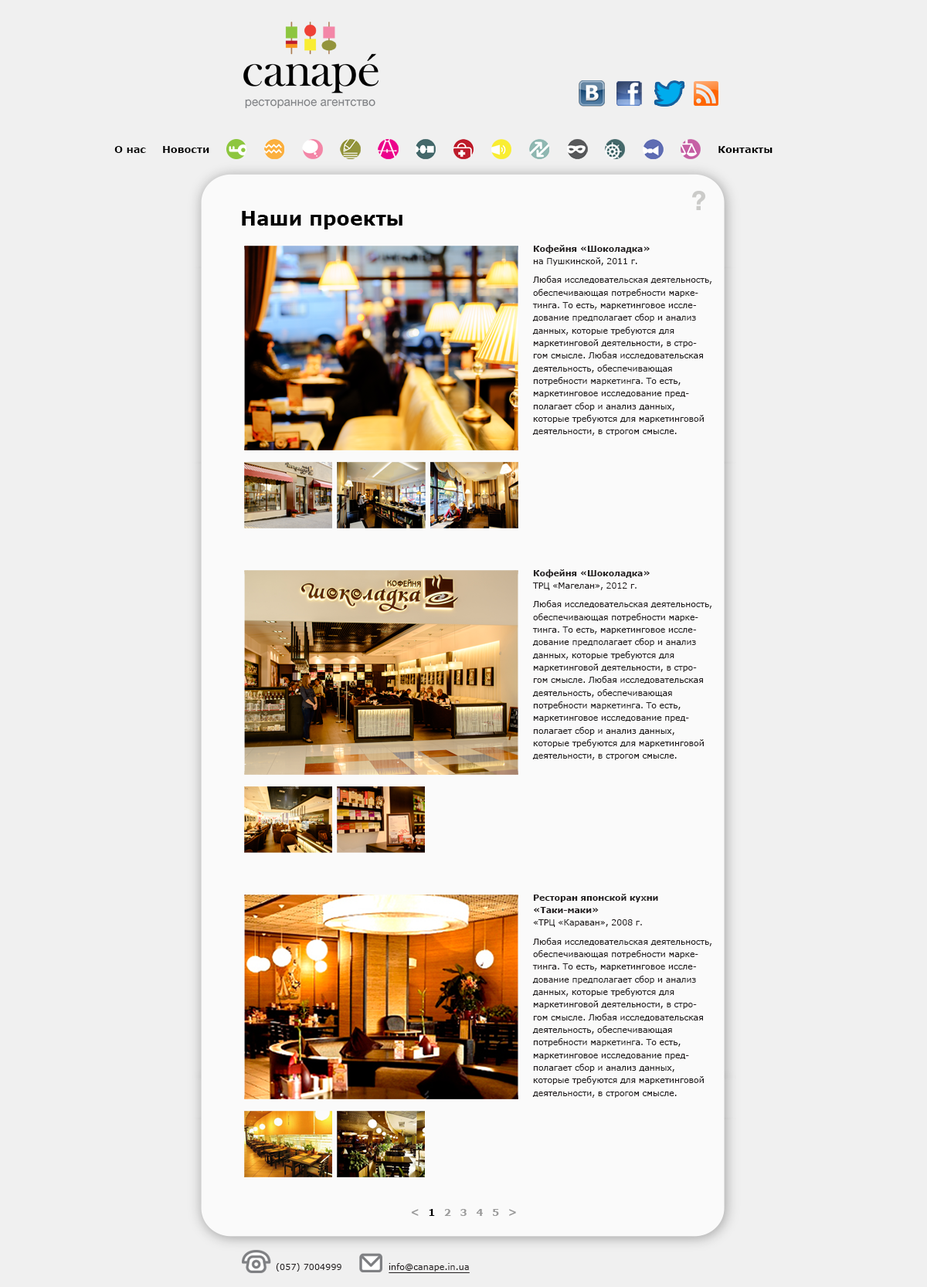
<style>
.page{position:relative;width:927px;height:1287px;background:#f0f0f0}
.page>*{position:absolute;margin:0}
.t1{font:10px "Verdana-Bold";color:#000000}
.t2{font:19.3px "Verdana-Bold";color:#000000}
.t3{font:8.7px/12.6px "Verdana";letter-spacing:-0.02em;color:#231f20}
.t4{font:8.7px/12.6px "Verdana-Bold";letter-spacing:-0.02em;color:#231f20}
.t5{font:9.7px "Verdana-Bold";letter-spacing:-0.02em;color:#9b9b9b}
.t6{font:9.7px "Verdana-Bold";letter-spacing:-0.02em;color:#000000}
.t7{font:8.7px "Verdana";color:#231f20}
</style>
<div class="page">
<p class="t1" style="left:114px;top:146px;width:32px;height:7px">О нас</p>
<p class="t1" style="left:163px;top:146px;width:46px;height:7px">Новости</p>
<p class="t1" style="left:718px;top:146px;width:54px;height:7px">Контакты</p>
<p class="t2" style="left:242px;top:211px;width:160px;height:18px">Наши проекты</p>
<p class="t3" style="left:532px;top:245px;width:180px;height:191px"><span class="t4">Кофейня «Шоколадка» <br></span>на Пушкинской, 2011 г.<br>Любая исследовательская деятельность,<br>обеспечивающая потребности марке-<br>тинга. То есть, маркетинговое иссле-<br>дование предполагает сбор и анализ<br>данных, которые требуются для<br>маркетинговой деятельности, в стро-<br>гом смысле. Любая исследовательская<br>деятельность, обеспечивающая<br>потребности маркетинга. То есть,<br>маркетинговое исследование пред-<br>полагает сбор и анализ данных,<br>которые требуются для маркетинговой<br>деятельности, в строгом смысле.</p>
<p class="t3" style="left:532px;top:569px;width:180px;height:191px"><span class="t4">Кофейня «Шоколадка» <br></span>ТРЦ «Магелан», 2012 г.<br>Любая исследовательская деятельность,<br>обеспечивающая потребности марке-<br>тинга. То есть, маркетинговое иссле-<br>дование предполагает сбор и анализ<br>данных, которые требуются для<br>маркетинговой деятельности, в стро-<br>гом смысле. Любая исследовательская<br>деятельность, обеспечивающая<br>потребности маркетинга. То есть,<br>маркетинговое исследование пред-<br>полагает сбор и анализ данных,<br>которые требуются для маркетинговой<br>деятельности, в строгом смысле.</p>
<p class="t3" style="left:532px;top:894px;width:180px;height:203px"><span class="t4">Ресторан японской кухни<br>«Таки-маки» <br></span>«ТРЦ «Караван», 2008 г.<br>Любая исследовательская деятельность,<br>обеспечивающая потребности марке-<br>тинга. То есть, маркетинговое иссле-<br>дование предполагает сбор и анализ<br>данных, которые требуются для<br>маркетинговой деятельности, в стро-<br>гом смысле. Любая исследовательская<br>деятельность, обеспечивающая<br>потребности маркетинга. То есть,<br>маркетинговое исследование пред-<br>полагает сбор и анализ данных,<br>которые требуются для маркетинговой<br>деятельности, в строгом смысле.</p>
<p class="t5" style="left:411px;top:1209px;width:105px;height:7px">&lt;   <span class="t6">1</span>   2   3   4   5   &gt;</p>
<p class="t7" style="left:276px;top:1263px;width:65px;height:8px">(057) 7004999</p>
<p class="t7" style="left:388px;top:1263px;width:81px;height:8px">info@canape.in.ua</p>
</div>
